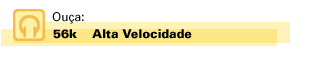
<style>
.page{position:relative;width:330px;height:60px;background:#ffffff}
.page>*{position:absolute;margin:0}
.t1{font:12px "Univers";letter-spacing:-0.005em;color:#000000}
.t2{font:12px "Univers-Black";letter-spacing:-0.005em;color:#000000}
</style>
<div class="page">
<p class="t1" style="left:52px;top:12px;width:32px;height:12px">Ouça:</p>
<p class="t2" style="left:53px;top:29px;width:24px;height:10px">56k</p>
<p class="t2" style="left:92px;top:29px;width:100px;height:10px">Alta Velocidade</p>
</div>
